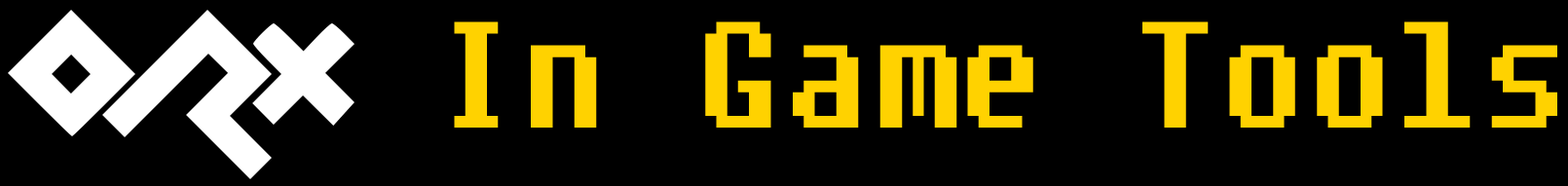
<style>
.page{position:relative;width:1568px;height:186px;background:#000000}
.page>*{position:absolute;margin:0}
.t1{font:150.3px "Fixedsys";color:#ffd200;scale:0.93 1}
</style>
<div class="page">
<p class="t1" style="left:454px;top:21px;width:1103px;height:107px">In Game Tools</p>
</div>
